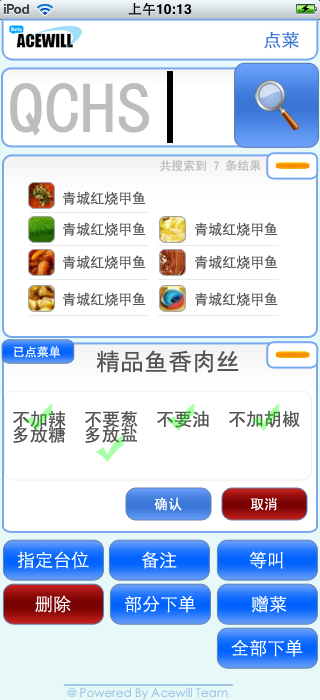
<style>
.page{position:relative;width:320px;height:700px;background:#ffffff}
.page>*{position:absolute;margin:0}
.t1{font:18px "STXihei";color:#3b77d7}
.t2{font:72px "SimHei";color:#bdbdbd}
.t3{font:72px "SimHei";color:#000000}
.t4{font:12px "SimHei";color:#bdbdbd}
.t5{font:14px "STXihei";color:#545454}
.t6{font:12px "SimHei";color:#ffffff}
.t7{font:24px "SimHei";color:#545454}
.t8{font:18px "SimHei";color:#545454}
.t9{font:14px "SimHei";color:#fefefe}
.t10{font:18px "STXihei";color:#ffffff}
.t11{font:12px "STXihei";color:#a2c8e5}
</style>
<div class="page">
<p class="t1" style="left:264px;top:31px;width:35px;height:18px">点菜</p>
<p class="t2" style="left:10px;top:71px;width:163px;height:72px">QCHS<span class="t3">|</span></p>
<p class="t4" style="left:160px;top:159px;width:101px;height:13px">共搜索到 7 条结果</p>
<p class="t5" style="left:63px;top:191px;width:83px;height:14px">青城红烧甲鱼</p>
<p class="t5" style="left:63px;top:222px;width:83px;height:14px">青城红烧甲鱼</p>
<p class="t5" style="left:195px;top:222px;width:83px;height:14px">青城红烧甲鱼</p>
<p class="t5" style="left:63px;top:255px;width:83px;height:14px">青城红烧甲鱼</p>
<p class="t5" style="left:195px;top:255px;width:83px;height:14px">青城红烧甲鱼</p>
<p class="t5" style="left:63px;top:292px;width:83px;height:14px">青城红烧甲鱼</p>
<p class="t5" style="left:195px;top:292px;width:83px;height:14px">青城红烧甲鱼</p>
<p class="t6" style="left:14px;top:346px;width:46px;height:12px">已点菜单</p>
<p class="t7" style="left:96px;top:350px;width:143px;height:23px">精品鱼香肉丝</p>
<p class="t8" style="left:13px;top:410px;width:287px;height:33px">不加辣  不要葱  不要油  不加胡椒<br>多放糖  多放盐</p>
<p class="t9" style="left:154px;top:497px;width:28px;height:14px">确认</p>
<p class="t9" style="left:250px;top:497px;width:27px;height:14px">取消</p>
<p class="t10" style="left:17px;top:551px;width:72px;height:18px">指定台位</p>
<p class="t10" style="left:141px;top:551px;width:36px;height:18px">备注</p>
<p class="t10" style="left:249px;top:551px;width:34px;height:18px">等叫</p>
<p class="t10" style="left:35px;top:595px;width:36px;height:18px">删除</p>
<p class="t10" style="left:125px;top:595px;width:71px;height:18px">部分下单</p>
<p class="t10" style="left:252px;top:595px;width:35px;height:18px">赠菜</p>
<p class="t10" style="left:231px;top:639px;width:72px;height:18px">全部下单</p>
<p class="t11" style="left:67px;top:688px;width:161px;height:12px">@ Powered By Acewill Team</p>
</div>
